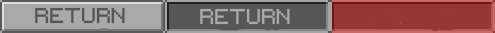
<style>
.page{position:relative;width:495px;height:33px;background:#933737}
.page>*{position:absolute;margin:0}
.t1{font:17px "Starlight";color:#565656}
.t2{font:17px "Starlight";color:#a9a9a9}
</style>
<div class="page">
<p class="t1" style="left:35px;top:7px;width:90px;height:17px">RETURN</p>
<p class="t2" style="left:200px;top:8px;width:90px;height:17px">RETURN</p>
</div>
